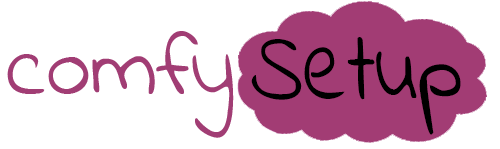
<style>
.page{position:relative;width:500px;height:149px;background:#ffffff}
.page>*{position:absolute;margin:0}
.t1{font:89.5px "IndieFlower";color:#a23d74}
.t2{font:99.9px "IndieFlower";color:#000000;scale:0.85 1}
</style>
<div class="page">
<p class="t1" style="left:7px;top:31px;width:227px;height:107px">comfy</p>
<p class="t2" style="left:251px;top:37px;width:210px;height:98px">Setup</p>
</div>
